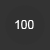
<style>
.page{position:relative;width:50px;height:50px;background:#333333}
.page>*{position:absolute;margin:0}
.t1{font:12px "ArialMT";color:#ffffff}
</style>
<div class="page">
<p class="t1" style="left:15px;top:20px;width:19px;height:9px">100</p>
</div>
